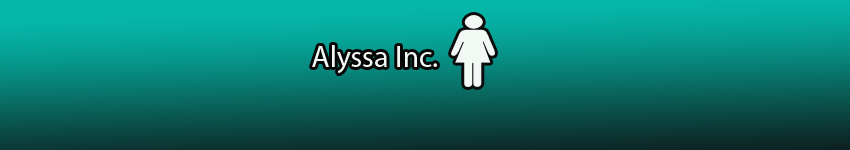
<style>
.page{position:relative;width:850px;height:150px}
.page>*{position:absolute;margin:0}
.t1{font:30px "MyriadPro-Regular";color:#f2f8f4}
.t2{font:30px "MyriadPro-Regular";color:#0e0e0e}
</style>
<div class="page">
<p class="t1" style="left:312px;top:45px;width:125px;height:29px">Alyssa Inc.<br><br><span class="t2">A</span></p>
</div>
